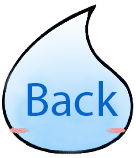
<style>
.page{position:relative;width:136px;height:158px;background:#ffffff}
.page>*{position:absolute;margin:0}
.t1{font:48px "MyriadPro-Regular";color:#0066cc}
</style>
<div class="page">
<p class="t1" style="left:27px;top:81px;width:92px;height:35px">Back</p>
</div>
